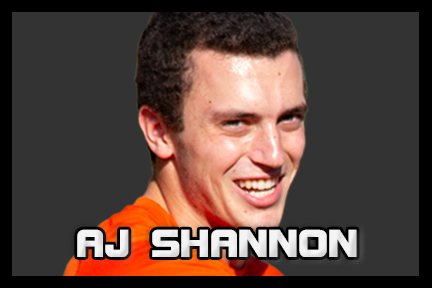
<style>
.page{position:relative;width:432px;height:288px;background:#333333}
.page>*{position:absolute;margin:0}
.t1{font:41.7px "BolsterBold";color:#f3f3f3}
</style>
<div class="page">
<p class="t1" style="left:77px;top:229px;width:280px;height:28px">AJ SHANNON</p>
</div>
